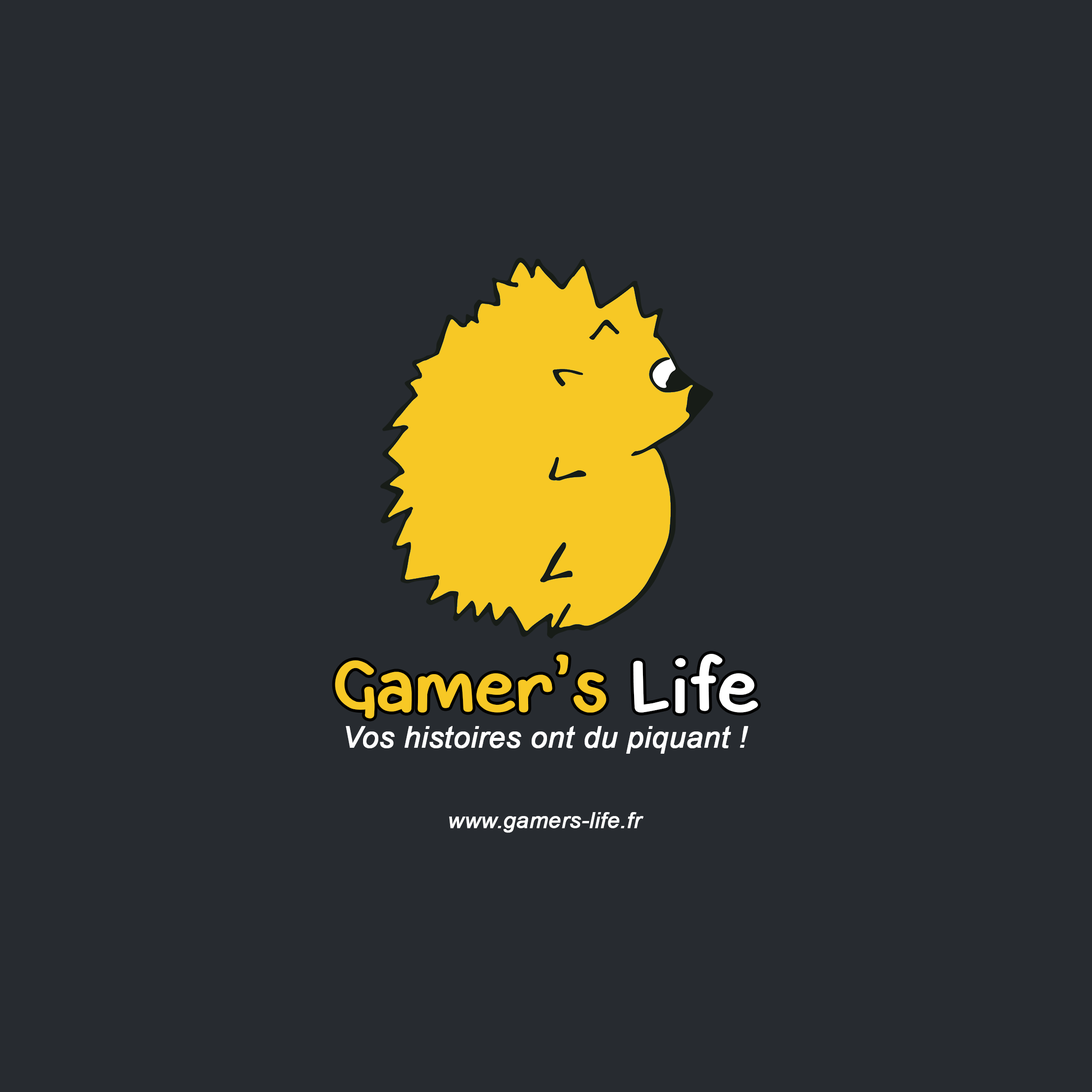
<style>
.page{position:relative;width:1092px;height:1092px;background:#272b30}
.page>*{position:absolute;margin:0}
.t1{font:84.1px "SmartKid";color:#f7c825;font-weight:bold}
.t2{font:84.1px "SmartKid";color:#ffffff;font-weight:bold}
.t3{font:29.7px "Arial-ItalicMT";color:#ffffff;font-weight:bold}
.t4{font:22.3px "Arial-ItalicMT";color:#ffffff;font-weight:bold}
</style>
<div class="page">
<p class="t1" style="left:335px;top:654px;width:423px;height:65px">Gamer’s <span class="t2">Life</span></p>
<p class="t3" style="left:346px;top:726px;width:402px;height:28px">Vos histoires ont du piquant !</p>
<p class="t4" style="left:449px;top:812px;width:194px;height:21px">www.gamers-life.fr</p>
</div>
